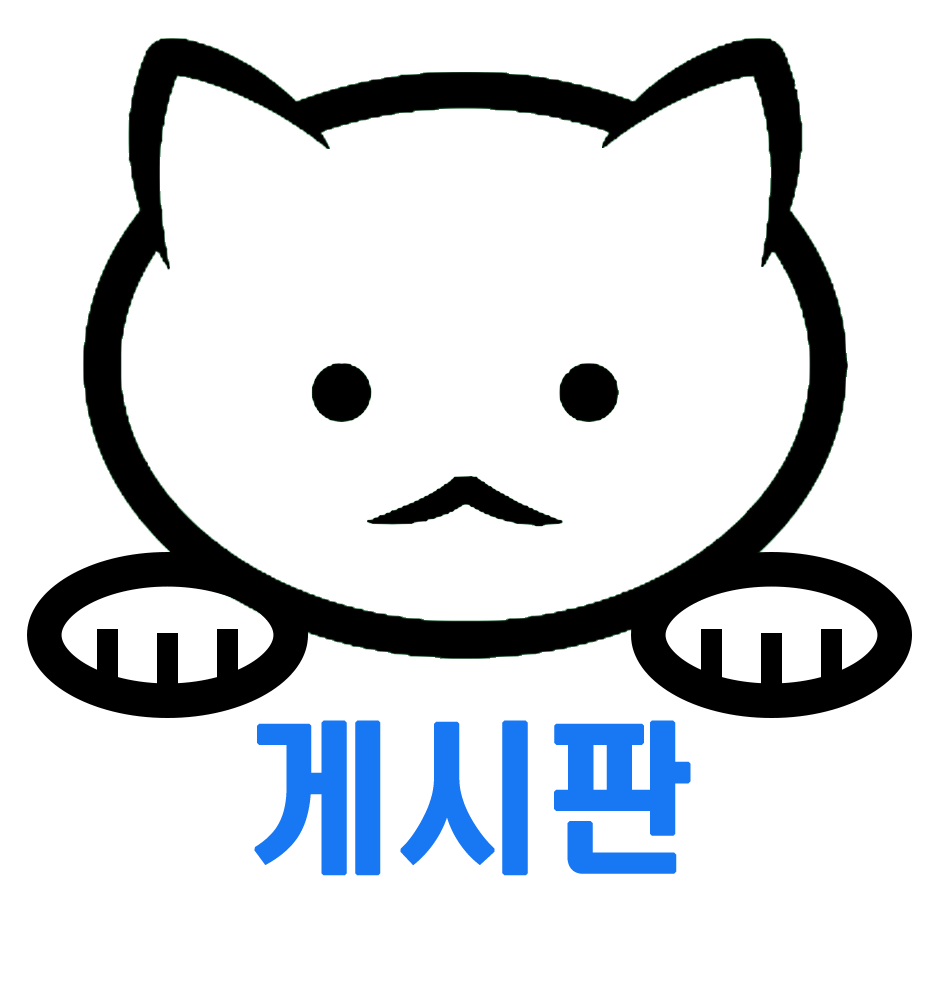
<style>
.page{position:relative;width:939px;height:992px;background:#ffffff}
.page>*{position:absolute;margin:0}
.t1{font:160.2px "H2hdrM";color:#1877f2;text-transform:uppercase;font-weight:bold;scale:0.91 1}
</style>
<div class="page">
<p class="t1" style="left:254px;top:720px;width:437px;height:156px">게시판</p>
</div>
